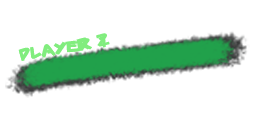
<style>
.page{position:relative;width:256px;height:128px;background:#ffffff}
.page>*{position:absolute;margin:0}
.t1{font:16.7px "SharkMadeInJapan";color:#81ed7e;scale:1.09 1}
.t2{font:16px "SharkMadeInJapan";color:#81ed7e;scale:1.18 1}
</style>
<div class="page">
<p class="t1" style="left:18px;top:33px;width:92px;height:28px;rotate:-10deg">Player 2</p>
<p class="t2" style="left:19px;top:36px;width:87px;height:25px;rotate:-9deg">Player 1</p>
</div>
